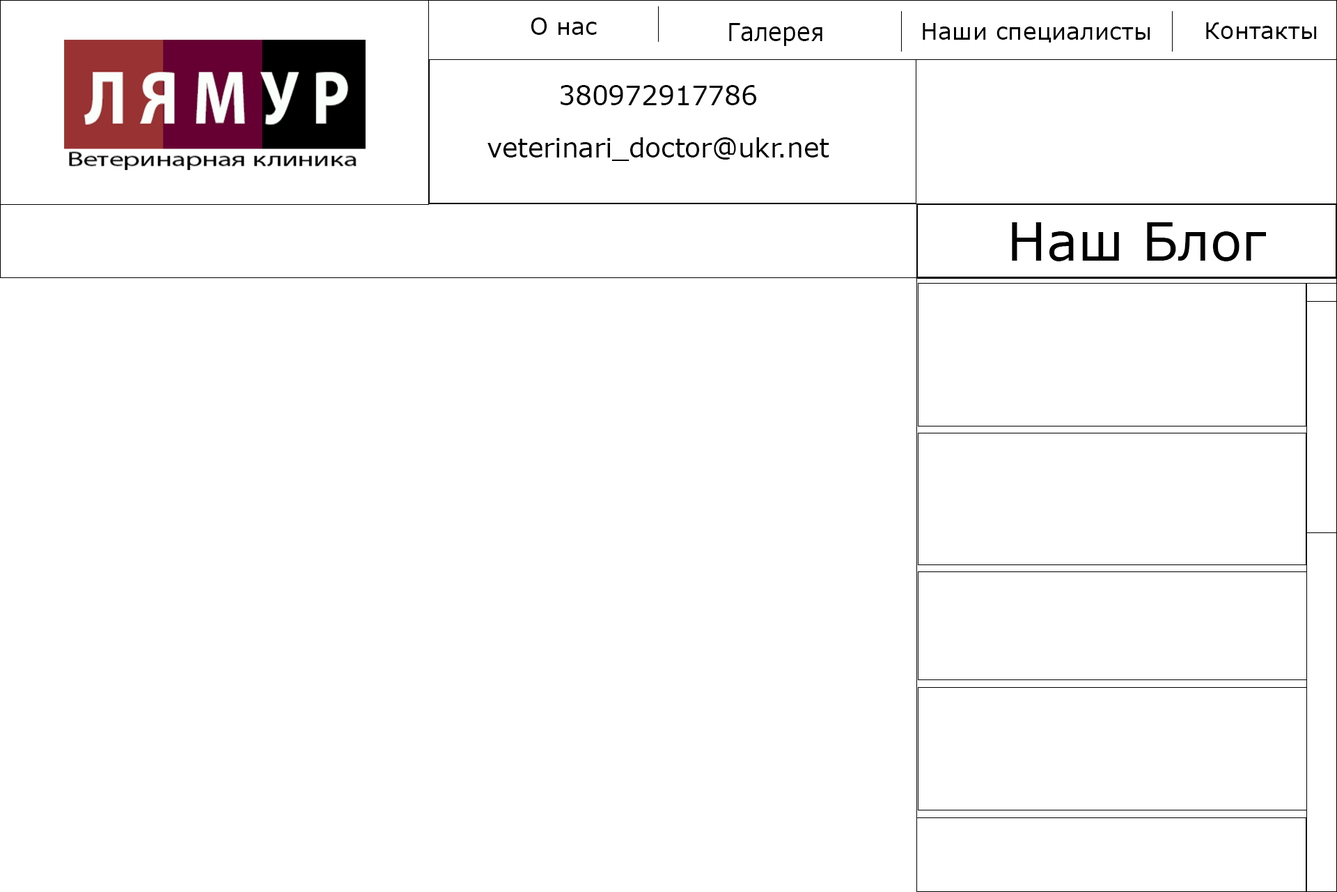
<style>
.page{position:relative;width:1337px;height:892px;background:#ffffff}
.page>*{position:absolute;margin:0}
.t1{font:23.2px "MSReferenceSansSerif";color:#000000}
.t2{font:25.2px "MSReferenceSansSerif";color:#000000;scale:0.92 1}
.t3{font:26.1px/52.2px "MSReferenceSansSerif";color:#000000}
.t4{font:52.2px "MSReferenceSansSerif";color:#000000}
</style>
<div class="page">
<p class="t1" style="left:531px;top:17px;width:66px;height:18px">О нас</p>
<p class="t2" style="left:729px;top:23px;width:94px;height:23px">Галерея</p>
<p class="t1" style="left:923px;top:23px;width:228px;height:19px">Наши специалисты</p>
<p class="t1" style="left:1206px;top:22px;width:111px;height:17px">Контакты</p>
<p class="t3" style="left:488px;top:85px;width:342px;height:76px;text-align:center">380972917786<br>veterinari_doctor@ukr.net</p>
<p class="t4" style="left:1012px;top:222px;width:254px;height:39px">Наш Блог</p>
</div>
